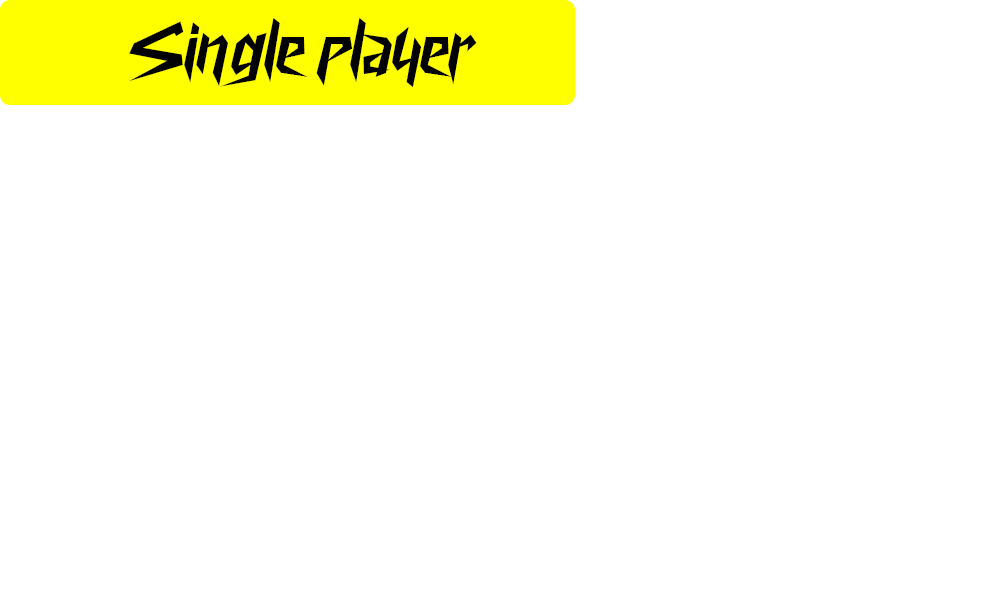
<style>
.page{position:relative;width:1001px;height:595px;background:#ffffff}
.page>*{position:absolute;margin:0}
.t1{font:72px "CyberwayRiders";color:#000000}
</style>
<div class="page">
<p class="t1" style="left:129px;top:18px;width:348px;height:69px">Single player</p>
</div>
